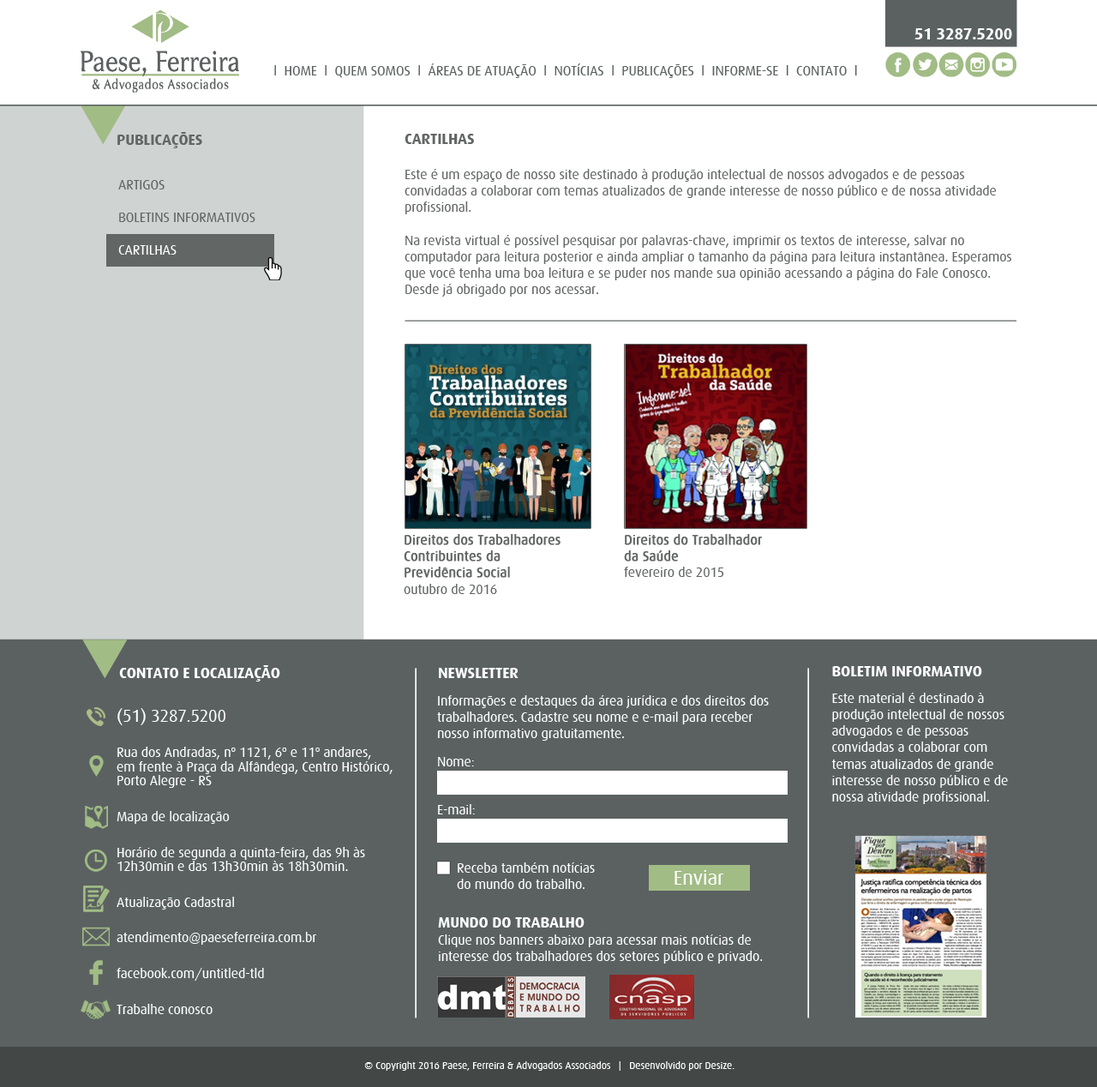
<style>
.page{position:relative;width:1097px;height:1087px;background:#ffffff}
.page>*{position:absolute;margin:0}
.t1{font:16.1px "Dax-Bold";letter-spacing:-0.01em;color:#ffffff}
.t2{font:13.7px "Dax-Regular";letter-spacing:-0.01em;color:#5b6161}
.t3{font:12.6px "ArialMT";letter-spacing:-0.01em;color:#000000}
.t4{font:15.4px "Dax-Bold";letter-spacing:-0.01em;color:#626665}
.t5{font:13.7px "Dax-Regular";letter-spacing:-0.01em;color:#626665}
.t6{font:13.7px "Dax-Regular";letter-spacing:-0.01em;color:#626665;font-weight:bold}
.t7{font:15.4px "Dax-Bold";letter-spacing:-0.01em;color:#ffffff}
.t8{font:13.7px "Dax-Regular";letter-spacing:-0.01em;color:#ffffff}
.t9{font:13.7px/14.2px "Dax-Regular";letter-spacing:-0.01em;color:#ffffff}
.t10{font:17.1px/14.2px "Dax-Regular";letter-spacing:-0.01em;color:#ffffff}
.t11{font:20.4px "Dax-Regular";letter-spacing:-0.01em;color:#ffffff}
.t12{font:10.3px "Dax-Regular";letter-spacing:-0.01em;color:#ffffff}
</style>
<div class="page">
<p class="t1" style="left:915px;top:28px;width:97px;height:11px">51 3287.5200</p>
<p class="t2" style="left:274px;top:63px;width:583px;height:15px"><span class="t3"><br></span>l  HOME  l  QUEM SOMOS  l  ÁREAS DE ATUAÇÃO  l  NOTÍCIAS  l  PUBLICAÇÕES  l  INFORME-SE  l  CONTATO  l</p>
<p class="t4" style="left:117px;top:132px;width:85px;height:16px">PUBLICAÇÕES</p>
<p class="t5" style="left:405px;top:134px;width:606px;height:163px"><span class="t4">CARTILHAS<br><br></span>Este é um espaço de nosso site destinado à produção intelectual de nossos advogados e de pessoas convidadas a colaborar com temas atualizados de grande interesse de nosso público e de nossa atividade profissional.<br><br>Na revista virtual é possível pesquisar por palavras-chave, imprimir os textos de interesse, salvar no computador para leitura posterior e ainda ampliar o tamanho da página para leitura instantânea. Esperamos que você tenha uma boa leitura e se puder nos mande sua opinião acessando a página do Fale Conosco. Desde já obrigado por nos acessar.</p>
<p class="t6" style="left:404px;top:534px;width:157px;height:60px">Direitos dos Trabalhadores <br>Contribuintes da <br>Previdência Social<br><span class="t5">outubro de 2016</span></p>
<p class="t6" style="left:624px;top:534px;width:139px;height:43px">Direitos do Trabalhador<br>da Saúde<br><span class="t5">fevereiro de 2015</span></p>
<p class="t7" style="left:119px;top:665px;width:161px;height:16px">CONTATO E LOCALIZAÇÃO</p>
<p class="t8" style="left:832px;top:666px;width:176px;height:138px"><span class="t7">BOLETIM INFORMATIVO<br><br></span>Este material é destinado à produção intelectual de nossos advogados e de pessoas convidadas a colaborar com temas atualizados de grande interesse de nosso público e de nossa atividade profissional.</p>
<p class="t7" style="left:439px;top:668px;width:80px;height:10px">NEWSLETTER</p>
<p class="t8" style="left:437px;top:695px;width:332px;height:46px">Informações e destaques da área jurídica e dos direitos dos trabalhadores. Cadastre seu nome e e-mail para receber nosso informativo gratuitamente.</p>
<p class="t9" style="left:117px;top:708px;width:276px;height:306px"><span class="t10">(51) 3287.5200<br><br></span>Rua dos Andradas, nº 1121, 6º e 11º andares, <br>em frente à Praça da Alfândega, Centro Histórico, Porto Alegre - RS<br><br>Mapa de localização<br><br>Horário de segunda a quinta-feira, das 9h às 12h30min e das 13h30min às 18h30min.<br><br>Atualização Cadastral<br><br>atendimento@paeseferreira.com.br<br><br>facebook.com/untitled-tld<br><br>Trabalhe conosco</p>
<p class="t8" style="left:438px;top:757px;width:36px;height:9px">Nome:</p>
<p class="t8" style="left:438px;top:804px;width:37px;height:10px">E-mail:</p>
<p class="t8" style="left:457px;top:862px;width:138px;height:27px">Receba também notícias<br>do mundo do trabalho.</p>
<p class="t11" style="left:675px;top:870px;width:49px;height:15px">Enviar</p>
<p class="t8" style="left:438px;top:917px;width:325px;height:46px"><span class="t7">MUNDO DO TRABALHO <br></span>Clique nos banners abaixo para acessar mais notícias de <br>interesse dos trabalhadores dos setores público e privado.</p>
<p class="t12" style="left:364px;top:1061px;width:371px;height:10px">© Copyright 2016 Paese, Ferreira &amp; Advogados Associados   |   Desenvolvido por Desize.</p>
</div>
